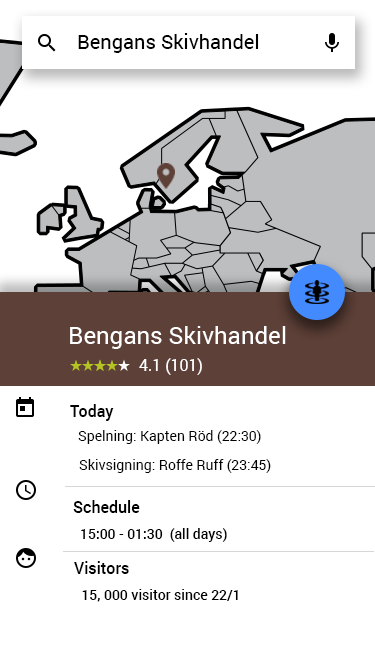
<style>
.page{position:relative;width:375px;height:667px;background:#ffffff}
.page>*{position:absolute;margin:0}
.t1{font:20px "Roboto-Regular";color:#000000}
.t2{font:24px "Roboto-Regular";color:#ffffff}
.t3{font:16px "Roboto-Regular";color:#ffffff}
.t4{font:16px "Roboto-Medium";color:#030303}
.t5{font:14px "Roboto-Regular";color:#030303}
.t6{font:14px "Roboto-Regular";color:#000000}
.t7{font:16px "Roboto-Medium";color:#000000}
.t8{font:14px "Roboto-Medium";color:#000000}
</style>
<div class="page">
<p class="t1" style="left:78px;top:33px;width:181px;height:20px">Bengans Skivhandel</p>
<p class="t2" style="left:70px;top:326px;width:216px;height:23px">Bengans Skivhandel</p>
<p class="t3" style="left:139px;top:358px;width:63px;height:17px">4.1 (101)</p>
<p class="t4" style="left:70px;top:404px;width:44px;height:17px">Today</p>
<p class="t5" style="left:78px;top:430px;width:183px;height:14px">Spelning: Kapten Röd (22:30)</p>
<p class="t6" style="left:79px;top:459px;width:192px;height:14px">Skivsigning: Roffe Ruff (23:45)</p>
<p class="t7" style="left:73px;top:500px;width:67px;height:13px">Schedule</p>
<p class="t8" style="left:81px;top:528px;width:146px;height:14px">15:00 - 01:30  (all days)</p>
<p class="t7" style="left:74px;top:561px;width:55px;height:13px">Visitors</p>
<p class="t8" style="left:82px;top:589px;width:156px;height:13px">15, 000 visitor since 22/1</p>
</div>
